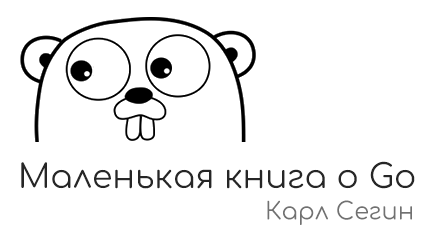
<style>
.page{position:relative;width:436px;height:244px;background:#ffffff}
.page>*{position:absolute;margin:0}
.t1{font:33px "Comfortaa";color:#262626}
.t2{font:24px "Comfortaa";color:#717171}
</style>
<div class="page">
<p class="t1" style="left:21px;top:161px;width:394px;height:28px">Маленькая книга о Go</p>
<p class="t2" style="left:267px;top:200px;width:145px;height:25px">Карл Сегин</p>
</div>
